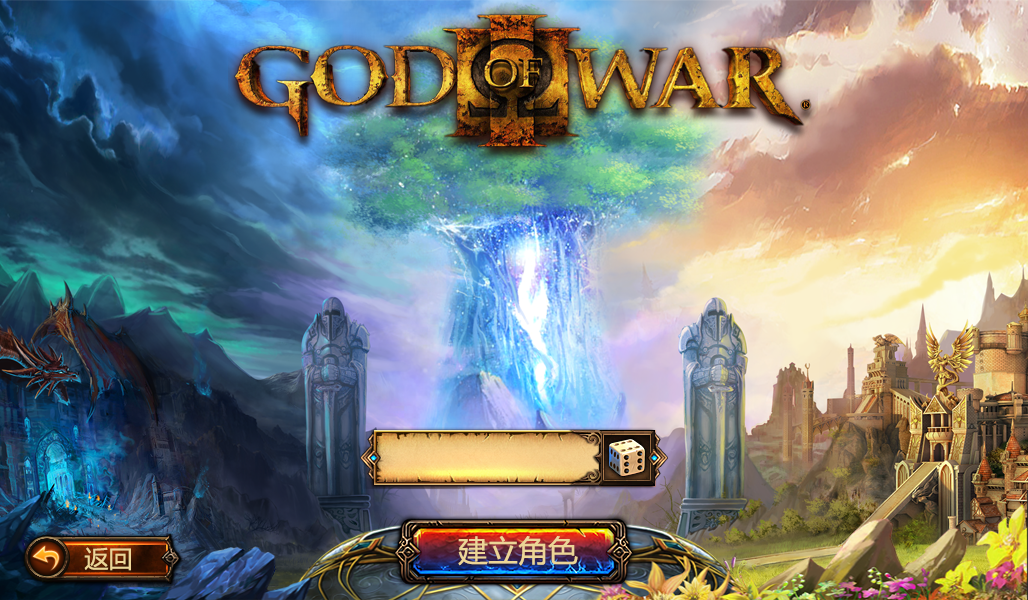
<style>
.page{position:relative;width:1028px;height:600px}
.page>*{position:absolute;margin:0}
.t1{font:30px "MicrosoftYaHei";color:#ecd597}
.t2{font:24px "MicrosoftYaHei";color:#ecd597}
</style>
<div class="page">
<p class="t1" style="left:458px;top:535px;width:120px;height:31px">建立角色</p>
<p class="t2" style="left:84px;top:547px;width:47px;height:24px">返回</p>
</div>
